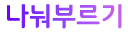
<style>
.page{position:relative;width:128px;height:32px;background:#ffffff}
.page>*{position:absolute;margin:0}
.t1{font:26.7px "12LotteMartDreamBold";text-transform:uppercase}
</style>
<div class="page">
<p class="t1" style="left:7px;top:4px;width:115px;height:25px">나눠부르기</p>
</div>
